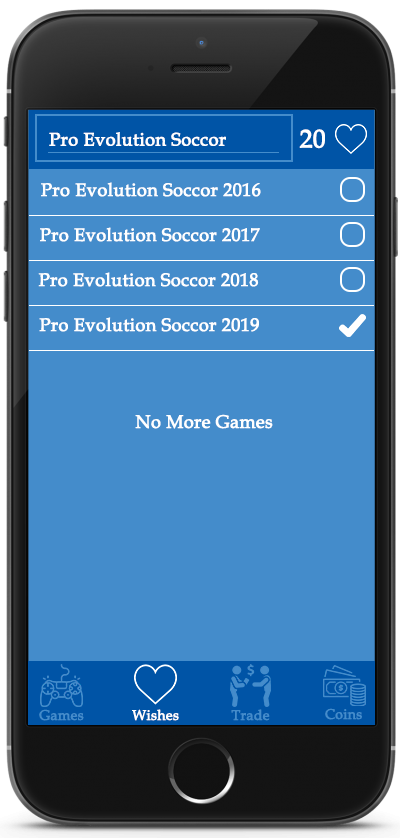
<style>
.page{position:relative;width:400px;height:838px;background:#448ccb}
.page>*{position:absolute;margin:0}
.t1{font:18px "BookAntiqua";color:#ffffff;font-weight:bold}
.t2{font:25px "BookAntiqua";color:#ffffff;font-weight:bold}
.t3{font:14px "BookAntiqua";color:#448ccb;font-weight:bold}
.t4{font:14px "BookAntiqua";color:#ffffff;font-weight:bold}
</style>
<div class="page">
<p class="t1" style="left:49px;top:132px;width:177px;height:14px">Pro Evolution Soccor</p>
<p class="t2" style="left:299px;top:129px;width:26px;height:20px">20</p>
<p class="t1" style="left:41px;top:182px;width:220px;height:15px">Pro Evolution Soccor 2016</p>
<p class="t1" style="left:40px;top:227px;width:220px;height:15px">Pro Evolution Soccor 2017</p>
<p class="t1" style="left:38px;top:272px;width:221px;height:15px">Pro Evolution Soccor 2018</p>
<p class="t1" style="left:39px;top:317px;width:220px;height:15px">Pro Evolution Soccor 2019</p>
<p class="t1" style="left:135px;top:414px;width:138px;height:15px">No More Games</p>
<p class="t3" style="left:39px;top:709px;width:45px;height:12px">Games</p>
<p class="t4" style="left:132px;top:709px;width:47px;height:12px">Wishes</p>
<p class="t3" style="left:231px;top:709px;width:39px;height:12px">Trade</p>
<p class="t3" style="left:325px;top:708px;width:37px;height:12px">Coins</p>
</div>
